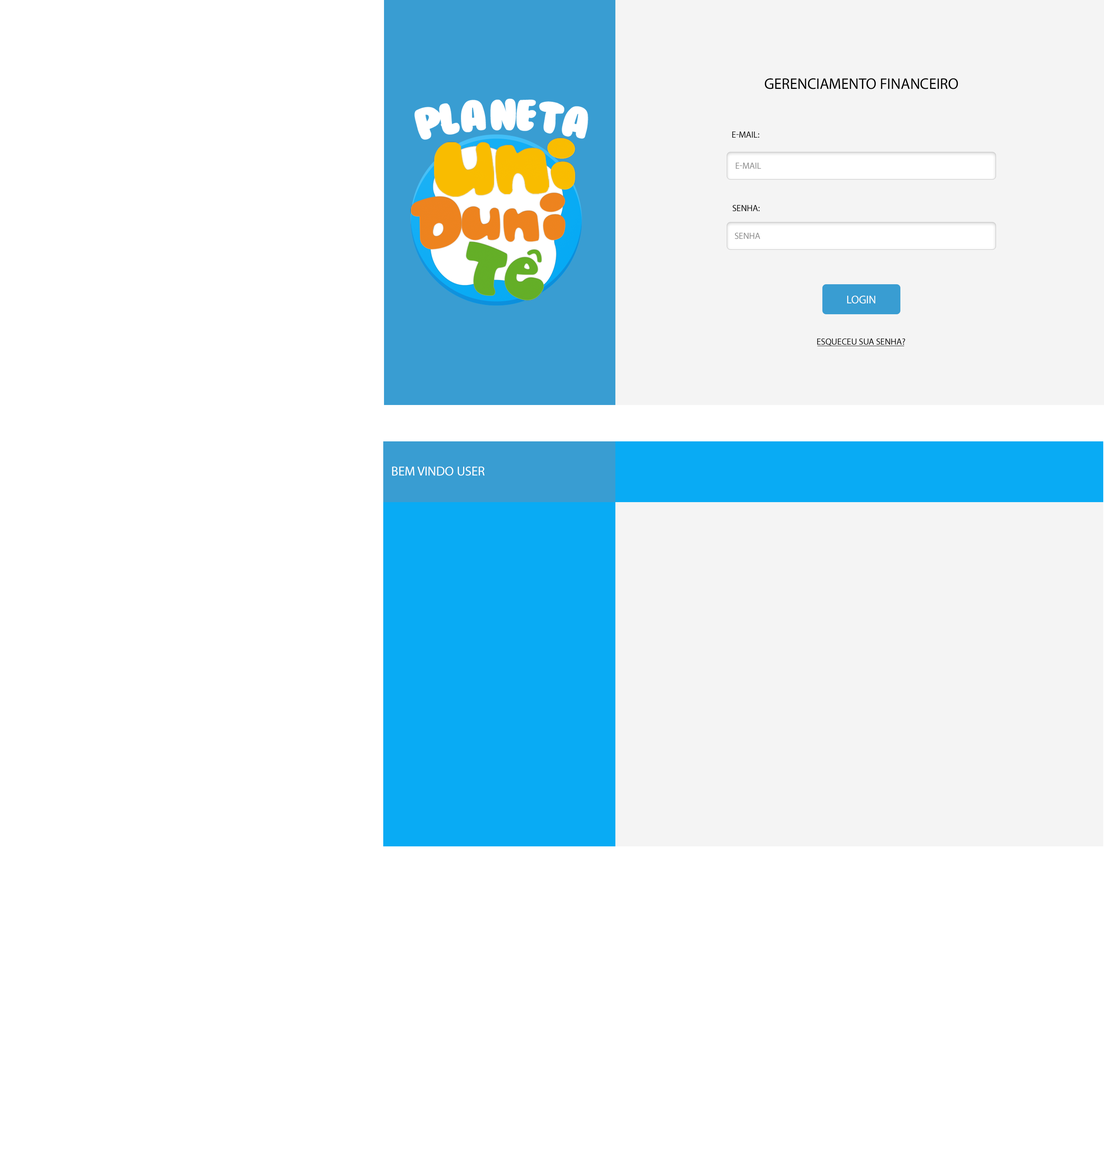
<style>
.page{position:relative;width:1104px;height:1173px;background:#ffffff}
.page>*{position:absolute;margin:0}
.t1{font:15.4px "MyriadPro-Regular";letter-spacing:-0.005em;color:#000000;text-transform:uppercase}
.t2{font:9px "MyriadPro-Regular";letter-spacing:-0.005em;color:#000000;text-transform:uppercase}
.t3{font:9px "MyriadPro-Regular";letter-spacing:-0.005em;color:#8b8b8b;text-transform:uppercase}
.t4{font:11.2px "MyriadPro-Regular";letter-spacing:-0.005em;color:#fcfcfc;text-transform:uppercase}
.t5{font:13.1px "MyriadPro-Regular";letter-spacing:-0.005em;color:#ffffff;text-transform:uppercase}
</style>
<div class="page">
<p class="t1" style="left:765px;top:78px;width:193px;height:11px">Gerenciamento Financeiro</p>
<p class="t2" style="left:732px;top:131px;width:27px;height:7px">E-mail:</p>
<p class="t3" style="left:736px;top:162px;width:25px;height:7px">E-mail</p>
<p class="t2" style="left:732px;top:205px;width:28px;height:7px">Senha:</p>
<p class="t3" style="left:735px;top:232px;width:25px;height:7px">Senha</p>
<p class="t4" style="left:847px;top:296px;width:28px;height:8px">login</p>
<p class="t2" style="left:817px;top:338px;width:88px;height:8px">esqueceu sua senha?</p>
<p class="t5" style="left:392px;top:466px;width:92px;height:10px">Bem vindo User</p>
</div>
